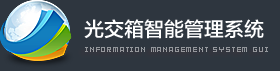
<style>
.page{position:relative;width:280px;height:71px;background:#2e363f}
.page>*{position:absolute;margin:0}
.t1{font:20px "FZLTZHK--GBK1-0";color:#ffffff}
</style>
<div class="page">
<p class="t1" style="left:84px;top:19px;width:180px;height:20px">光交箱智能管理系统</p>
</div>
